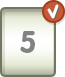
<style>
.page{position:relative;width:65px;height:77px;background:#ffffff}
.page>*{position:absolute;margin:0}
.t1{font:30px "RotondaC-Bold";letter-spacing:0.04em;color:#828282;text-transform:uppercase}
</style>
<div class="page">
<p class="t1" style="left:20px;top:31px;width:15px;height:22px">5</p>
</div>
